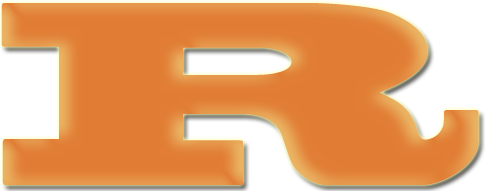
<style>
.page{position:relative;width:485px;height:191px;background:#e07c34}
.page>*{position:absolute;margin:0}
.t1{font:242.2px "BlackoakStd";color:#e17d35}
</style>
<div class="page">
<p class="t1" style="left:1px;top:3px;width:478px;height:182px">R</p>
</div>
